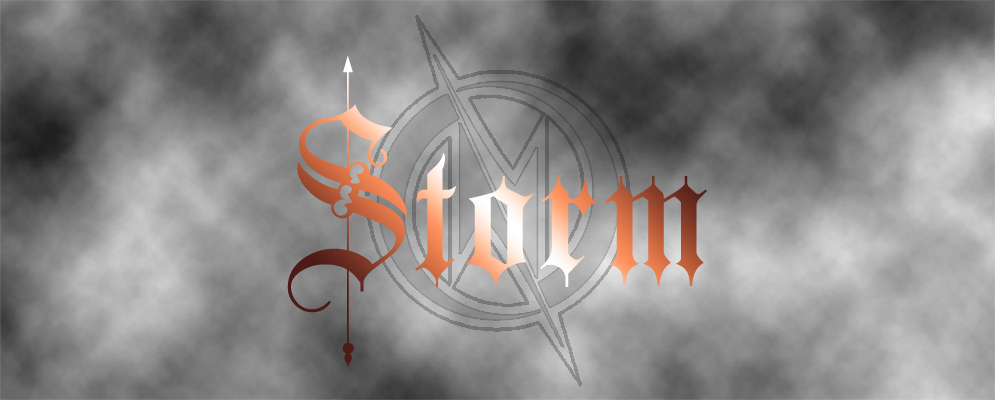
<style>
.page{position:relative;width:995px;height:400px}
.page>*{position:absolute;margin:0}
.t1{font:271.9px "Showcard"}
</style>
<div class="page">
<p class="t1" style="left:287px;top:56px;width:420px;height:311px">Storm</p>
</div>
